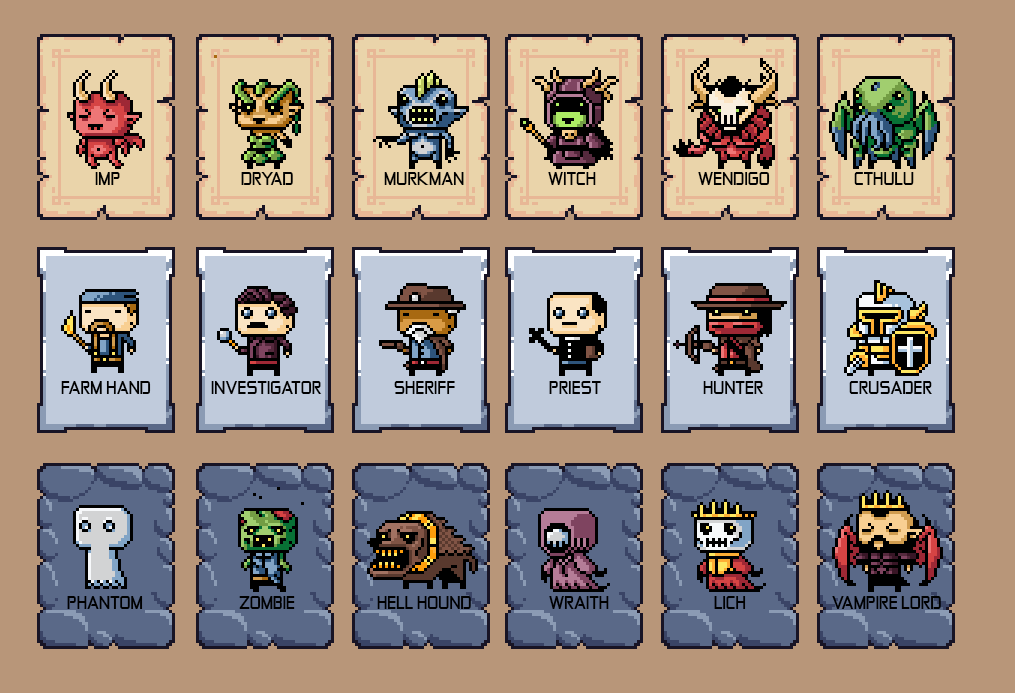
<style>
.page{position:relative;width:1015px;height:693px;background:#b89679}
.page>*{position:absolute;margin:0}
.t1{font:14px "Zekton-Bold";letter-spacing:0.01em;color:#000000}
</style>
<div class="page">
<p class="t1" style="left:95px;top:172px;width:25px;height:13px">IMP</p>
<p class="t1" style="left:241px;top:172px;width:52px;height:13px">DRYAD</p>
<p class="t1" style="left:384px;top:172px;width:80px;height:13px">MURKMAN</p>
<p class="t1" style="left:548px;top:172px;width:48px;height:13px">WITCH</p>
<p class="t1" style="left:698px;top:172px;width:72px;height:13px">WENDIGO</p>
<p class="t1" style="left:854px;top:172px;width:60px;height:13px">CTHULU</p>
<p class="t1" style="left:61px;top:381px;width:90px;height:13px">FARM HAND</p>
<p class="t1" style="left:211px;top:381px;width:111px;height:13px">INVESTIGATOR</p>
<p class="t1" style="left:394px;top:381px;width:61px;height:13px">SHERIFF</p>
<p class="t1" style="left:549px;top:381px;width:52px;height:13px">PRIEST</p>
<p class="t1" style="left:703px;top:381px;width:61px;height:13px">HUNTER</p>
<p class="t1" style="left:849px;top:381px;width:83px;height:13px">CRUSADER</p>
<p class="t1" style="left:67px;top:596px;width:76px;height:13px">PHANTOM</p>
<p class="t1" style="left:239px;top:596px;width:56px;height:13px">ZOMBIE</p>
<p class="t1" style="left:377px;top:596px;width:94px;height:13px">HELL HOUND</p>
<p class="t1" style="left:549px;top:596px;width:60px;height:13px">WRAITH</p>
<p class="t1" style="left:714px;top:596px;width:32px;height:13px">LICH</p>
<p class="t1" style="left:832px;top:596px;width:109px;height:13px">VAMPIRE LORD</p>
</div>
